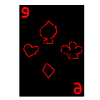
<style>
.page{position:relative;width:100px;height:100px;background:#000000}
.page>*{position:absolute;margin:0}
.t1{font:17.3px "Corbel-Bold";color:#ff0000}
</style>
<div class="page">
<p class="t1" style="left:21px;top:7px;width:9px;height:11px">9</p>
<p class="t1" style="left:73px;top:82px;width:9px;height:13px">9</p>
</div>
